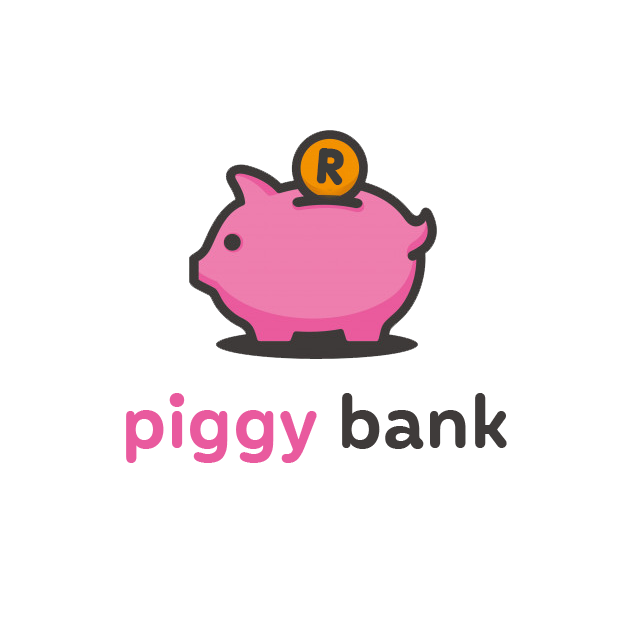
<style>
.page{position:relative;width:626px;height:626px;background:#ffffff}
.page>*{position:absolute;margin:0}
.t1{font:46.3px "Porkys";color:#3d3c3a}
.t2{font:71.8px "MohrRounded-SemiBold";color:#e95a9e}
.t3{font:71.8px "MohrRounded-SemiBold";color:#3f3b3a}
</style>
<div class="page">
<p class="t1" style="left:316px;top:148px;width:28px;height:37px">R</p>
<p class="t2" style="left:126px;top:393px;width:381px;height:70px">piggy <span class="t3">bank</span></p>
</div>
